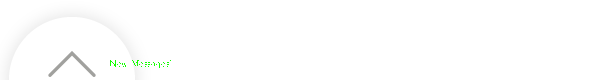
<style>
.page{position:relative;width:600px;height:80px;background:#ffffff}
.page>*{position:absolute;margin:0}
.t1{font:10px "STSongti-SC-Regular";letter-spacing:0.01em;color:#12ff00}
</style>
<div class="page">
<p class="t1" style="left:110px;top:60px;width:61px;height:8px">New Messages!</p>
</div>
